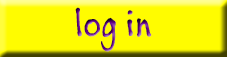
<style>
.page{position:relative;width:227px;height:57px;background:#fffc00}
.page>*{position:absolute;margin:0}
.t1{font:40px "BuxtonSketch"}
</style>
<div class="page">
<p class="t1" style="left:75px;top:7px;width:77px;height:45px">log in</p>
</div>
